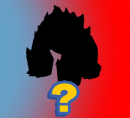
<style>
.page{position:relative;width:130px;height:118px;background:#000000}
.page>*{position:absolute;margin:0}
.t1{font:35px "DelaGothicOne-Regular";color:#ffcb05}
</style>
<div class="page">
<p class="t1" style="left:52px;top:83px;width:25px;height:29px">?</p>
</div>
